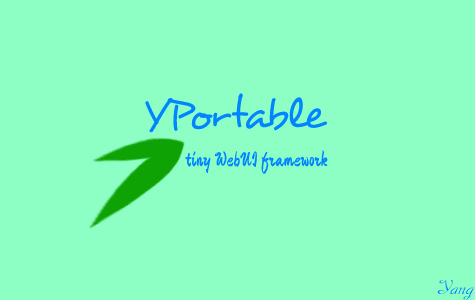
<style>
.page{position:relative;width:475px;height:300px;background:#8dffc5}
.page>*{position:absolute;margin:0}
.t1{font:45px "Desyrel";color:#0084ff}
.t2{font:20px "Devonshire-Regular";color:#0084ff}
.t3{font:20px "Dobkin-Plain";color:#0084ff}
</style>
<div class="page">
<p class="t1" style="left:145px;top:93px;width:183px;height:40px">YPortable</p>
<p class="t2" style="left:185px;top:150px;width:143px;height:24px">tiny WebUI framework</p>
<p class="t3" style="left:437px;top:279px;width:38px;height:21px">Yang</p>
</div>
